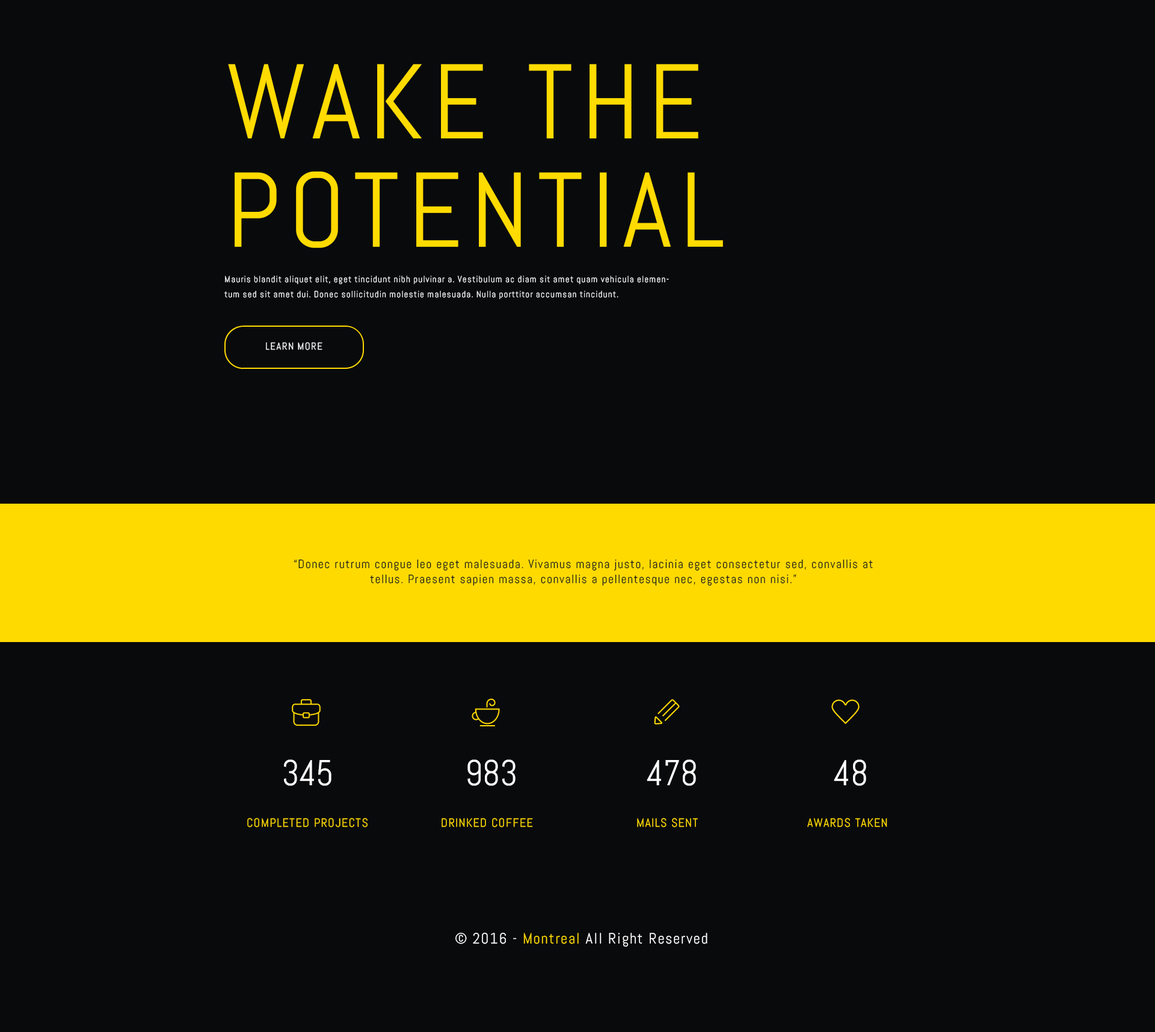
<style>
.page{position:relative;width:1155px;height:1032px;background:#090a0c}
.page>*{position:absolute;margin:0}
.t1{font:105.9px/108.3px "Abel-Regular";letter-spacing:0.075em;color:#ffdb00}
.t2{font:9px/15px "Abel-Regular";letter-spacing:0.075em;color:#ffffff}
.t3{font:10.1px "Abel-Regular";letter-spacing:0.075em;color:#ffffff}
.t4{font:12px/15px "Abel-Regular";letter-spacing:0.075em;color:#181a1f}
.t5{font:36.1px "Abel-Regular";color:#ffffff;scale:0.95 1}
.t6{font:12px "Abel-Regular";letter-spacing:0.075em;color:#ffdb00}
.t7{font:15px "Abel-Regular";letter-spacing:0.075em;color:#ffffff}
.t8{font:15px "Abel-Regular";letter-spacing:0.075em;color:#ffdb00}
</style>
<div class="page">
<p class="t1" style="left:228px;top:64px;width:495px;height:184px">WAKE THE<br>POTENTIAL</p>
<p class="t2" style="left:224px;top:276px;width:445px;height:24px">Mauris blandit aliquet elit, eget tincidunt nibh pulvinar a. Vestibulum ac diam sit amet quam vehicula elementum sed sit amet dui. Donec sollicitudin molestie malesuada. Nulla porttitor accumsan tincidunt.</p>
<p class="t3" style="left:266px;top:342px;width:57px;height:8px">LEARN MORE</p>
<p class="t4" style="left:294px;top:559px;width:579px;height:27px;text-align:center">“Donec rutrum congue leo eget malesuada. Vivamus magna justo, lacinia eget consectetur sed, convallis at tellus. Praesent sapien massa, convallis a pellentesque nec, egestas non nisi.”</p>
<p class="t5" style="left:284px;top:759px;width:48px;height:27px">345</p>
<p class="t5" style="left:468px;top:759px;width:48px;height:27px">983</p>
<p class="t5" style="left:647px;top:759px;width:49px;height:27px">478</p>
<p class="t5" style="left:834px;top:759px;width:33px;height:27px">48</p>
<p class="t6" style="left:247px;top:818px;width:121px;height:9px">COMPLETED PROJECTS</p>
<p class="t6" style="left:442px;top:818px;width:91px;height:9px">DRINKED COFFEE</p>
<p class="t6" style="left:637px;top:818px;width:61px;height:9px">MAILS SENT</p>
<p class="t6" style="left:808px;top:818px;width:80px;height:9px">AWARDS TAKEN</p>
<p class="t7" style="left:456px;top:933px;width:252px;height:14px">© 2016 - <span class="t8">Montreal</span> All Right Reserved</p>
</div>
